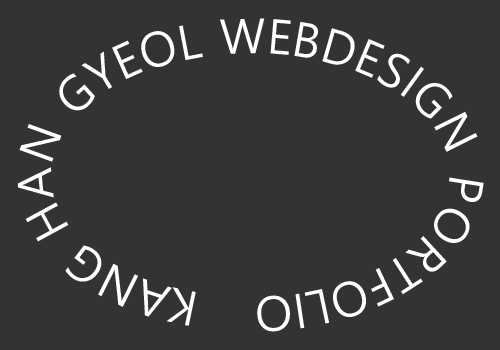
<style>
.page{position:relative;width:500px;height:350px;background:#333333}
.page>*{position:absolute;margin:0}
.t1{font:48px "MalgunGothic";color:#ffffff}
</style>
<div class="page">
<p class="t1" style="left:17px;top:18px;width:467px;height:314px">KANG HAN GYEOL WEBDESIGN PORTFOLIO</p>
</div>
